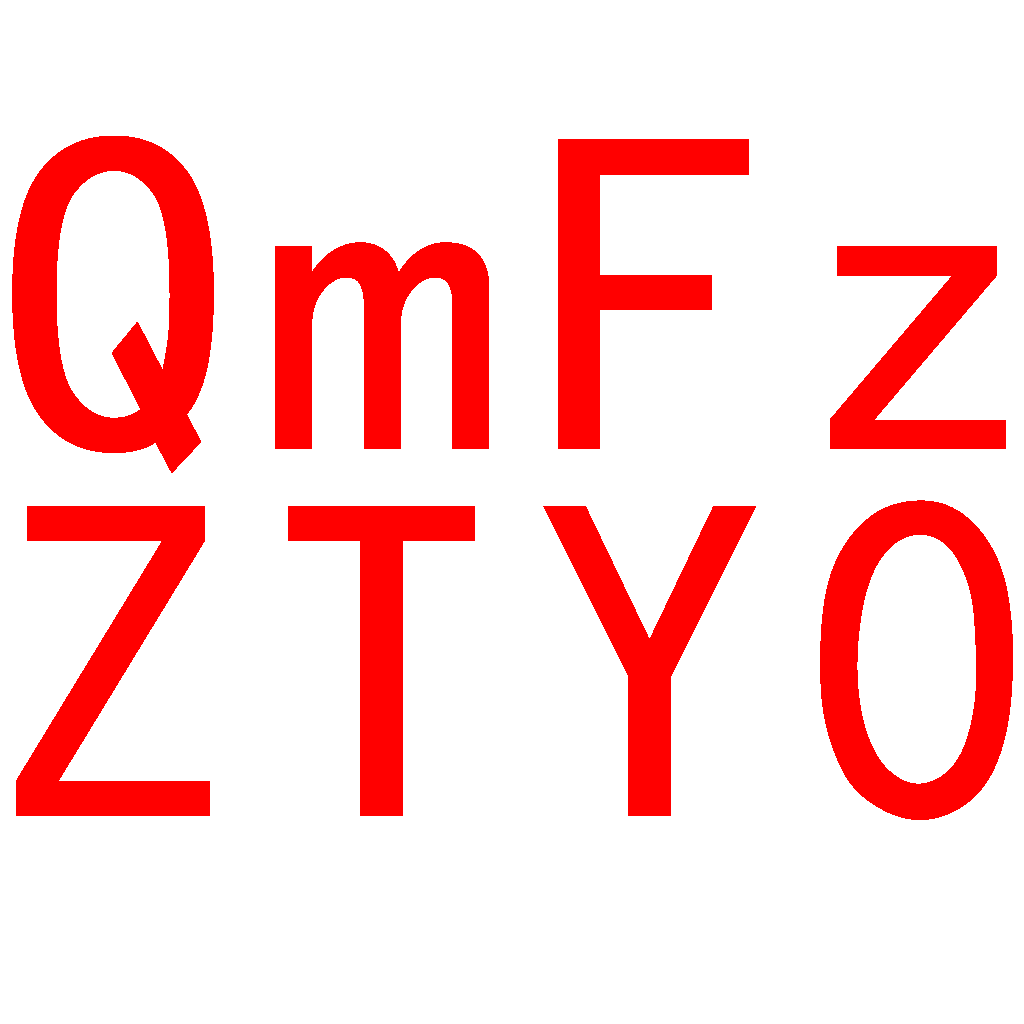
<style>
.page{position:relative;width:1024px;height:1024px;background:#ffffff}
.page>*{position:absolute;margin:0}
.t1{font:462.5px/366.7px "SimHei";letter-spacing:0.08em;color:#ff0000}
</style>
<div class="page">
<p class="t1" style="left:12px;top:136px;width:1001px;height:684px">QmFz<br>ZTY0</p>
</div>
